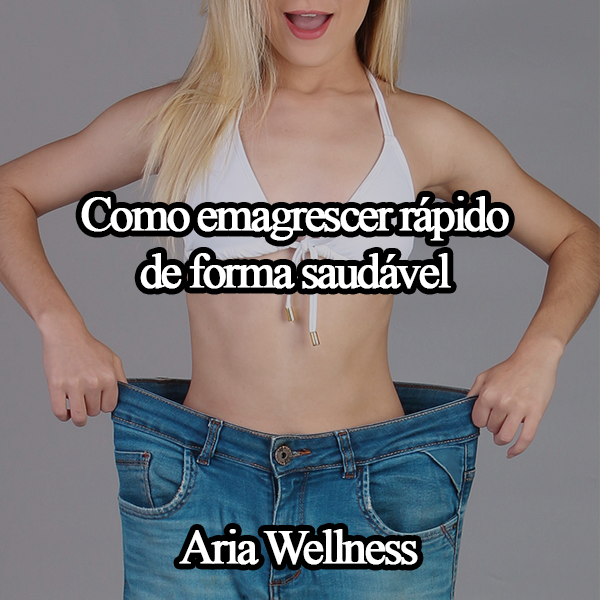
<style>
.page{position:relative;width:600px;height:600px}
.page>*{position:absolute;margin:0}
.t1{font:48px "TimesNewRomanPSMT";letter-spacing:-0.08em;color:#ffffff;font-weight:bold}
</style>
<div class="page">
<p class="t1" style="left:81px;top:196px;width:428px;height:93px;text-align:center">Como emagrescer rápido<br>de forma saudável</p>
<p class="t1" style="left:179px;top:529px;width:239px;height:36px">Aria Wellness</p>
</div>
